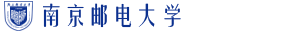
<style>
.page{position:relative;width:283px;height:32px;background:#ffffff}
.page>*{position:absolute;margin:0}
.t1{font:24px "FZYTK--GBK1-0";color:#0b308f}
</style>
<div class="page">
<p class="t1" style="left:43px;top:3px;width:138px;height:25px">南京邮电大学</p>
</div>
